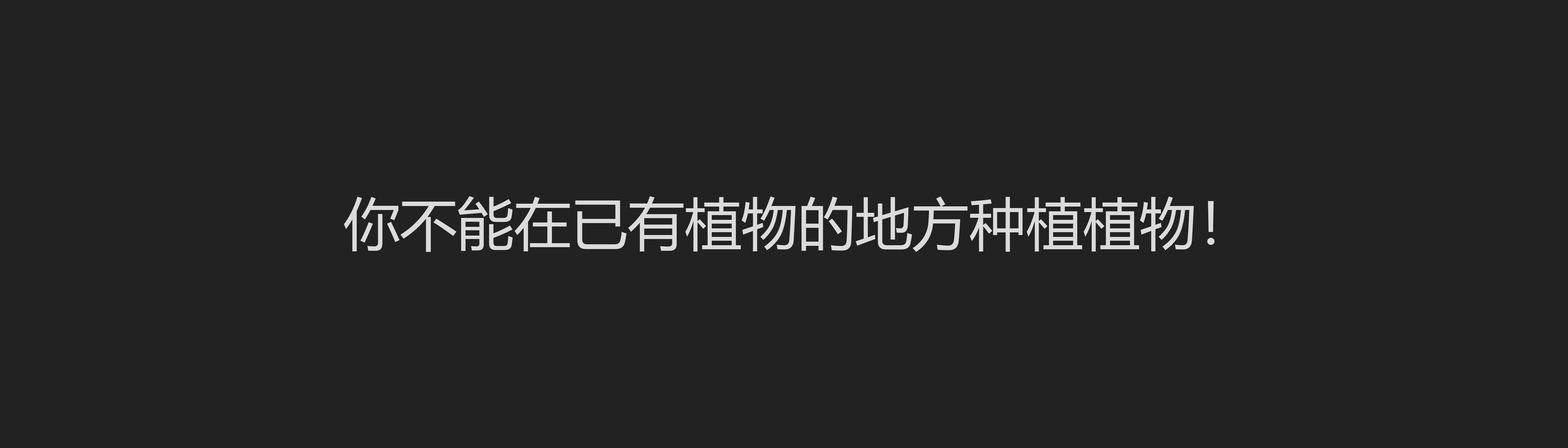
<style>
.page{position:relative;width:1568px;height:448px;background:#222222}
.page>*{position:absolute;margin:0}
.t1{font:56.9px "MicrosoftYaHei";color:#dbdbdb}
</style>
<div class="page">
<p class="t1" style="left:344px;top:196px;width:870px;height:56px">你不能在已有植物的地方种植植物！</p>
</div>
